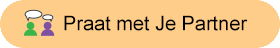
<style>
.page{position:relative;width:280px;height:48px;background:#fecd8a}
.page>*{position:absolute;margin:0}
.t1{font:19.9px "ArialMT";color:#000000}
</style>
<div class="page">
<p class="t1" style="left:64px;top:15px;width:184px;height:16px">Praat met Je Partner</p>
</div>
